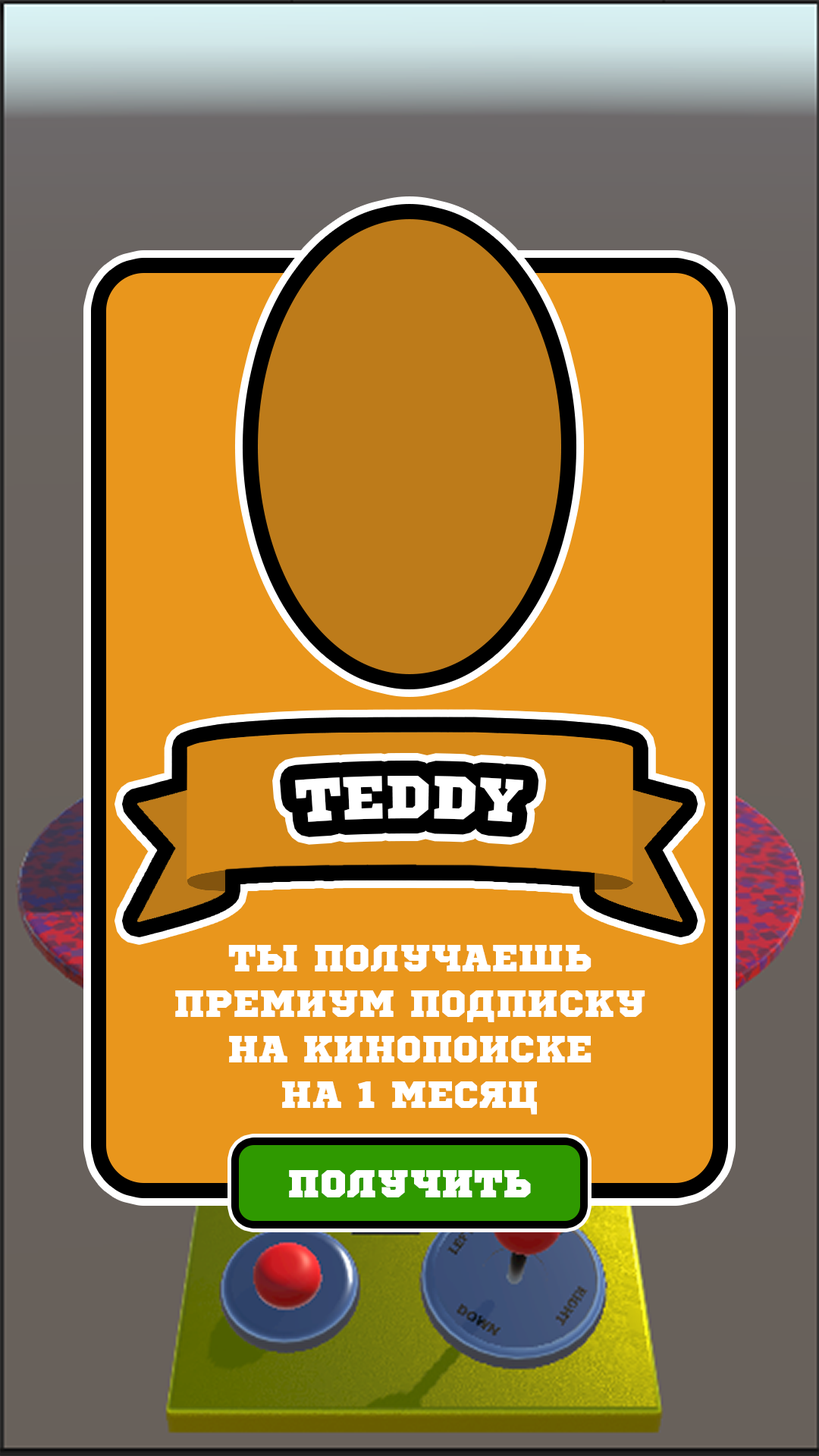
<style>
.page{position:relative;width:819px;height:1456px}
.page>*{position:absolute;margin:0}
.t1{font:60.7px "SportsWorld";color:#ffffff;text-transform:uppercase}
.t2{font:37.9px "SportsWorld";color:#ffffff;text-transform:uppercase}
.t3{font:37.9px "SportsWorld";color:#ffffff;text-transform:uppercase;font-weight:bold}
</style>
<div class="page">
<p class="t1" style="left:295px;top:776px;width:229px;height:46px">TEDDY</p>
<p class="t2" style="left:175px;top:945px;width:470px;height:170px;text-align:center">ты получаешь<br>премиум подписку<br>на кинопоиске<br>на 1 месяц</p>
<p class="t3" style="left:289px;top:1170px;width:242px;height:27px">ПОЛУЧИТЬ</p>
</div>
